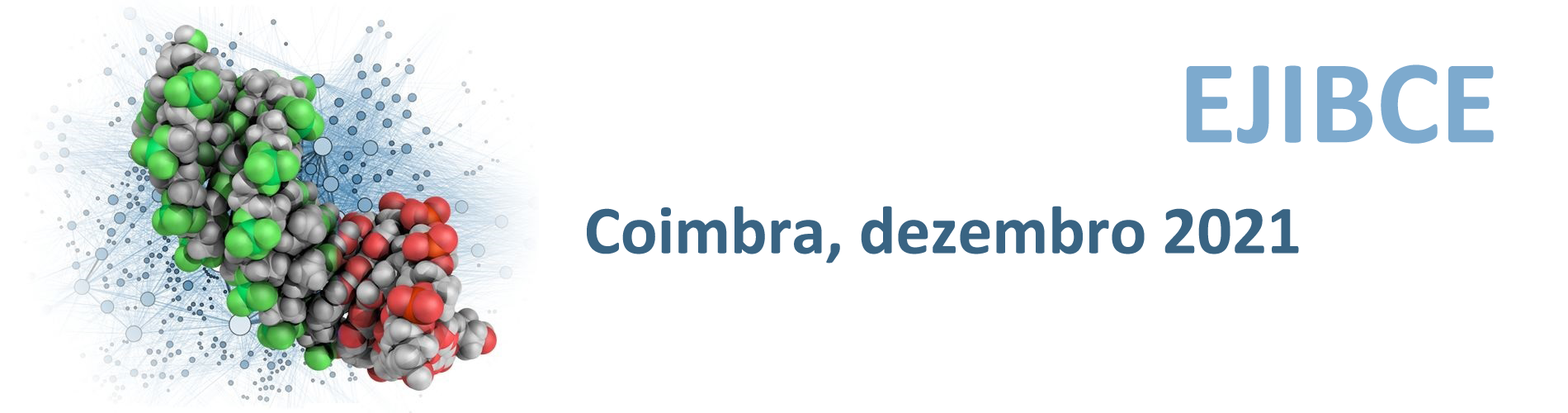
<style>
.page{position:relative;width:1568px;height:413px;background:#ffffff}
.page>*{position:absolute;margin:0}
.t1{font:68.8px/55.4px "Calibri-Bold";color:#396483}
.t2{font:120.4px/55.4px "Calibri-Bold";color:#7daace}
</style>
<div class="page">
<p class="t1" style="left:587px;top:64px;width:907px;height:199px"><span class="t2">                    EJIBCE<br><br></span>Coimbra, dezembro 2021</p>
</div>
